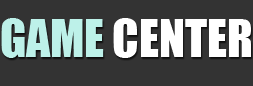
<style>
.page{position:relative;width:253px;height:86px;background:#333333}
.page>*{position:absolute;margin:0}
.t1{font:48px "Impact";color:#ffffff}
.t2{font:48px "Impact";color:#bdf1e9}
</style>
<div class="page">
<p class="t1" style="left:1px;top:18px;width:250px;height:40px"><span class="t2">GAME</span> CENTER</p>
</div>
